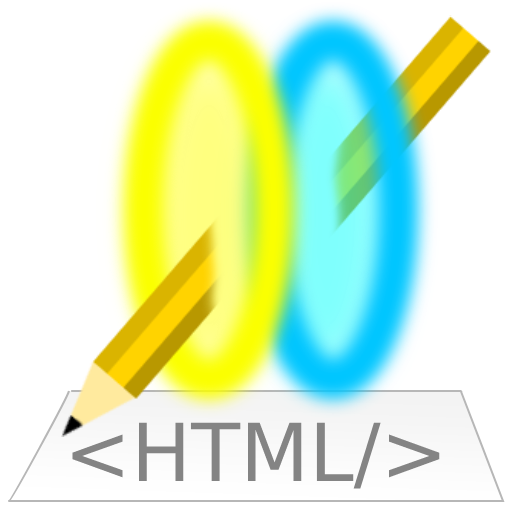
<style>
.page{position:relative;width:512px;height:512px;background:#ffffff}
.page>*{position:absolute;margin:0}
.t1{font:80px "DejaVuSans";color:#848484}
</style>
<div class="page">
<p class="t1" style="left:72px;top:422px;width:368px;height:67px">&lt;HTML/&gt;</p>
</div>
